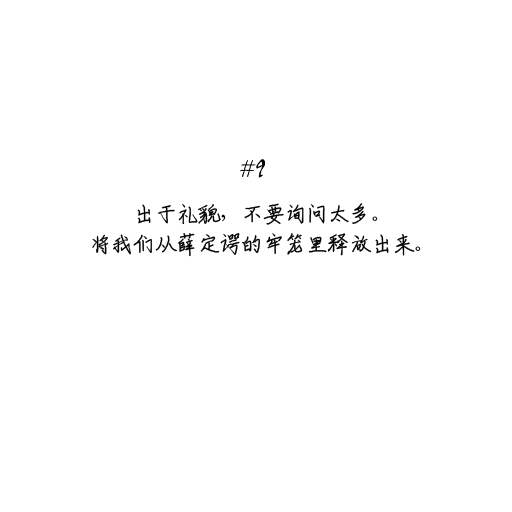
<style>
.page{position:relative;width:512px;height:512px;background:#ffffff}
.page>*{position:absolute;margin:0}
.t1{font:24px/30px "ShouShuti";letter-spacing:-0.1em;color:#000000}
</style>
<div class="page">
<p class="t1" style="left:92px;top:203px;width:329px;height:54px;text-align:center">出于礼貌，不要询问太多。<br>将我们从薛定谔的牢笼里释放出来。</p>
</div>
